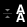
<style>
.page{position:relative;width:27px;height:27px;background:#000000}
.page>*{position:absolute;margin:0}
.t1{font:13px/8px "Helvetica-Bold";color:#ffffff}
</style>
<div class="page">
<p class="t1" style="left:16px;top:4px;width:9px;height:18px">A<br>A</p>
</div>
